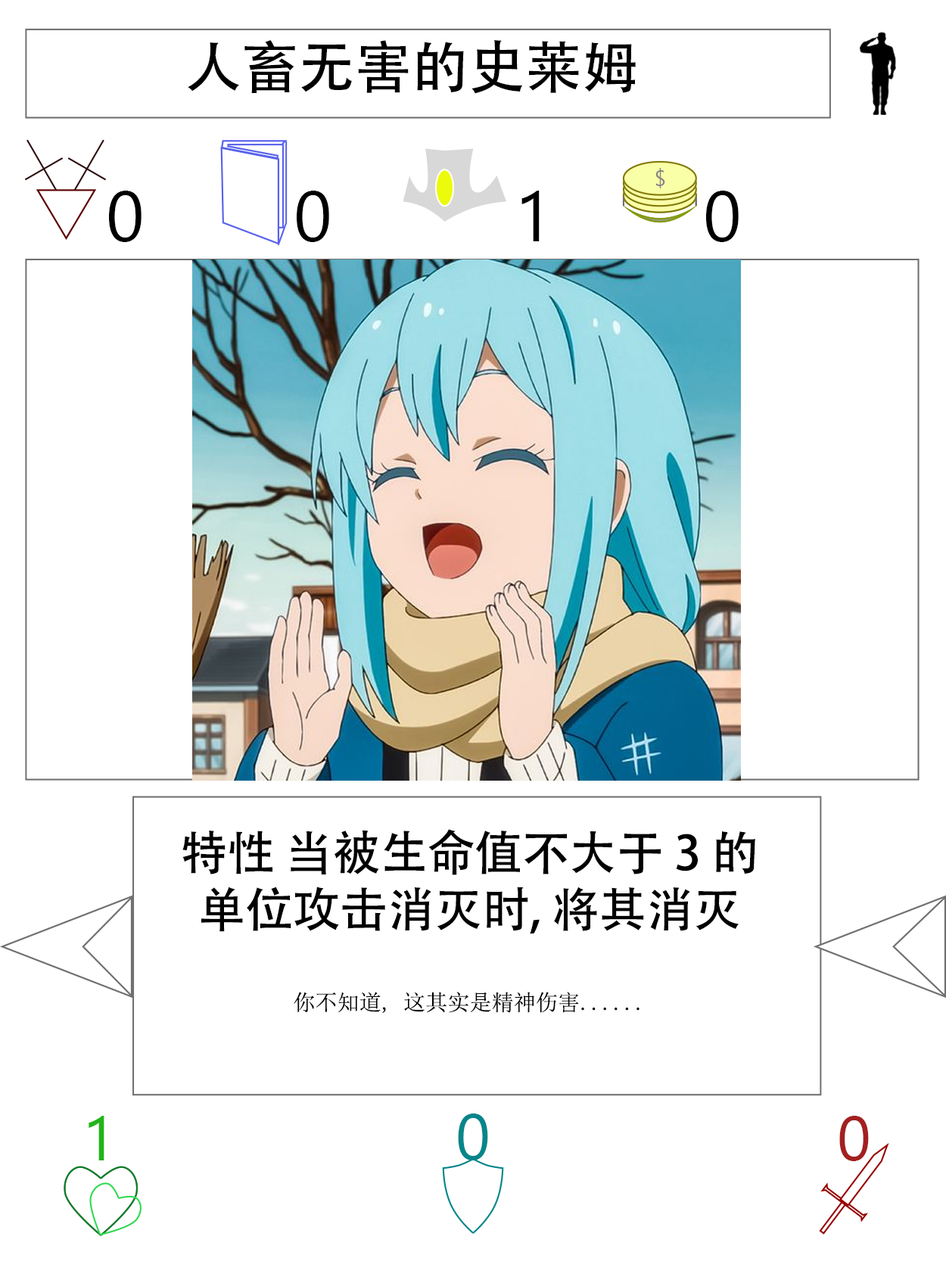
<style>
.page{position:relative;width:946px;height:1261px;background:#ffffff}
.page>*{position:absolute;margin:0}
.t1{font:56.7px "AdobeHeitiStd-Regular";color:#000000}
.t2{font:70.9px "SegoeUI";color:#000000}
.t3{font:47.3px "AdobeHeitiStd-Regular";color:#000000}
.t4{font:22.1px "NSimSun";color:#000000}
.t5{font:63px "SegoeUI";color:#22b518}
.t6{font:64.6px "SegoeUI";color:#05868a}
.t7{font:63px "SegoeUI";color:#a32020}
</style>
<div class="page">
<p class="t1" style="left:188px;top:40px;width:447px;height:54px">人畜无害的史莱姆</p>
<p class="t2" style="left:109px;top:191px;width:32px;height:51px">0</p>
<p class="t2" style="left:297px;top:191px;width:32px;height:51px">0</p>
<p class="t2" style="left:521px;top:191px;width:18px;height:50px">1</p>
<p class="t2" style="left:706px;top:191px;width:32px;height:51px">0</p>
<p class="t3" style="left:182px;top:829px;width:573px;height:184px;text-align:center">特性 当被生命值不大于 3 的单位攻击消灭时, 将其消灭<br><br><span class="t4">你不知道, 这其实是精神伤害......</span></p>
<p class="t5" style="left:89px;top:1116px;width:15px;height:44px">1</p>
<p class="t6" style="left:458px;top:1114px;width:30px;height:46px">0</p>
<p class="t7" style="left:839px;top:1116px;width:29px;height:45px">0</p>
</div>
